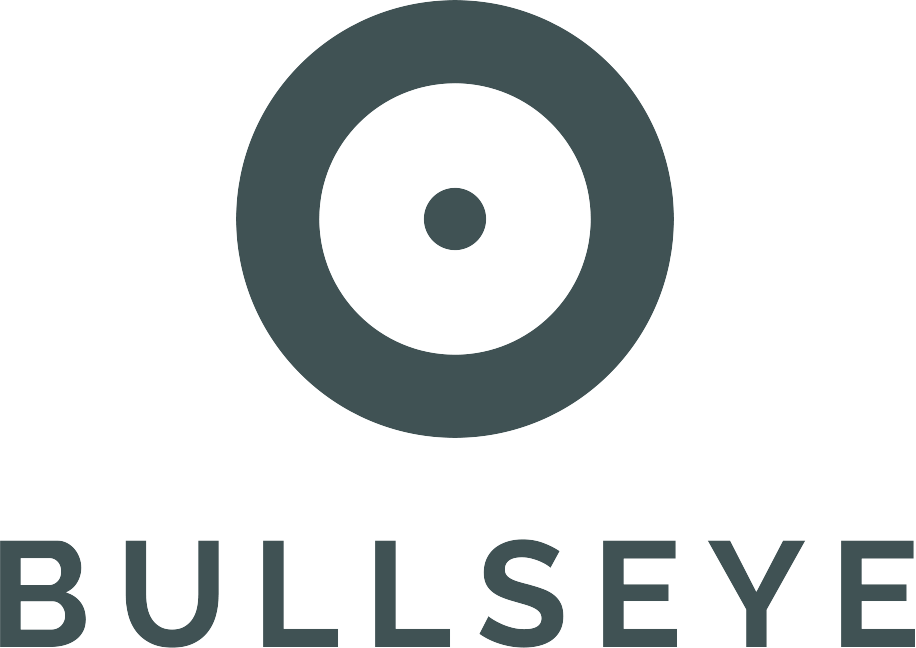
<style>
.page{position:relative;width:916px;height:648px;background:#ffffff}
.page>*{position:absolute;margin:0}
.t1{font:150px "Raleway-Bold";letter-spacing:0.162em;color:#405254}
</style>
<div class="page">
<p class="t1" style="left:0px;top:539px;width:916px;height:109px">BULLSEYE</p>
</div>
